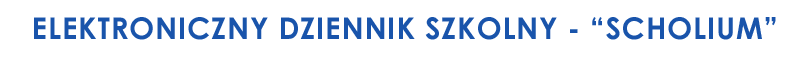
<style>
.page{position:relative;width:794px;height:57px;background:#ffffff}
.page>*{position:absolute;margin:0}
.t1{font:30px "CenturyGothic-Bold";letter-spacing:0.025em;color:#1954ab}
</style>
<div class="page">
<p class="t1" style="left:34px;top:17px;width:742px;height:23px">ELEKTRONICZNY DZIENNIK SZKOLNY - “SCHOLIUM”</p>
</div>
